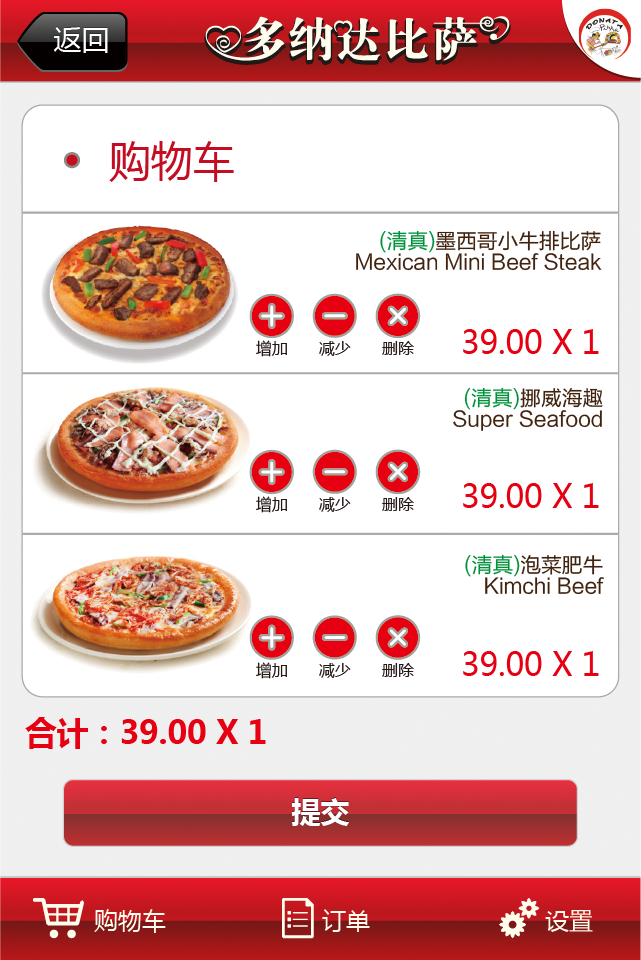
<style>
.page{position:relative;width:641px;height:960px;background:#ffffff}
.page>*{position:absolute;margin:0}
.t1{font:28px "MicrosoftYaHei"}
.t2{font:28px "MicrosoftYaHei";color:#ffffff}
.t3{font:42px "MicrosoftYaHei";color:#c30d23}
.t4{font:20.7px/20.7px "FZLTHK--GBK1-0";color:#40220f}
.t5{font:20.7px/20.7px "FZLTHK--GBK1-0";color:#00913a}
.t6{font:31.5px "MicrosoftYaHei";color:#e60012}
.t7{font:16px "MicrosoftYaHei";color:#231815}
.t8{font:20.8px/20.8px "FZLTHK--GBK1-0";color:#40220f}
.t9{font:20.8px/20.8px "FZLTHK--GBK1-0";color:#00913a}
.t10{font:31.5px "MicrosoftYaHei-Bold";color:#e60012}
.t11{font:28.7px "MicrosoftYaHei-Bold";color:#ffffff}
.t12{font:24px "MicrosoftYaHei";color:#fffeee}
</style>
<div class="page">
<p class="t1" style="left:53px;top:26px;width:55px;height:26px">返回</p>
<p class="t2" style="left:53px;top:27px;width:55px;height:26px">返回</p>
<p class="t3" style="left:109px;top:141px;width:125px;height:41px">购物车</p>
<p class="t4" style="left:356px;top:230px;width:246px;height:41px;text-align:right"><span class="t5">(清真)</span>墨西哥小牛排比萨<br>Mexican Mini Beef Steak</p>
<p class="t6" style="left:463px;top:329px;width:136px;height:25px">39.00 X 1</p>
<p class="t7" style="left:256px;top:340px;width:31px;height:17px">增加</p>
<p class="t7" style="left:319px;top:341px;width:32px;height:15px">减少</p>
<p class="t7" style="left:382px;top:341px;width:32px;height:14px">删除</p>
<p class="t8" style="left:453px;top:387px;width:150px;height:44px;text-align:right"><span class="t9">(清真)</span>挪威海趣<br>Super Seafood</p>
<p class="t6" style="left:463px;top:483px;width:136px;height:25px">39.00 X 1</p>
<p class="t7" style="left:256px;top:496px;width:31px;height:17px">增加</p>
<p class="t7" style="left:319px;top:497px;width:32px;height:15px">减少</p>
<p class="t7" style="left:382px;top:497px;width:32px;height:14px">删除</p>
<p class="t4" style="left:465px;top:554px;width:139px;height:41px;text-align:right"><span class="t5">(清真)</span>泡菜肥牛<br>Kimchi Beef</p>
<p class="t6" style="left:463px;top:651px;width:136px;height:25px">39.00 X 1</p>
<p class="t7" style="left:256px;top:662px;width:31px;height:17px">增加</p>
<p class="t7" style="left:319px;top:663px;width:32px;height:15px">减少</p>
<p class="t7" style="left:382px;top:663px;width:32px;height:14px">删除</p>
<p class="t10" style="left:25px;top:717px;width:241px;height:32px">合计：39.00 X 1</p>
<p class="t11" style="left:291px;top:797px;width:58px;height:28px">提交</p>
<p class="t11" style="left:291px;top:798px;width:58px;height:28px">提交</p>
<p class="t12" style="left:94px;top:909px;width:72px;height:24px">购物车</p>
<p class="t12" style="left:322px;top:909px;width:48px;height:23px">订单</p>
<p class="t12" style="left:545px;top:910px;width:48px;height:22px">设置</p>
</div>
